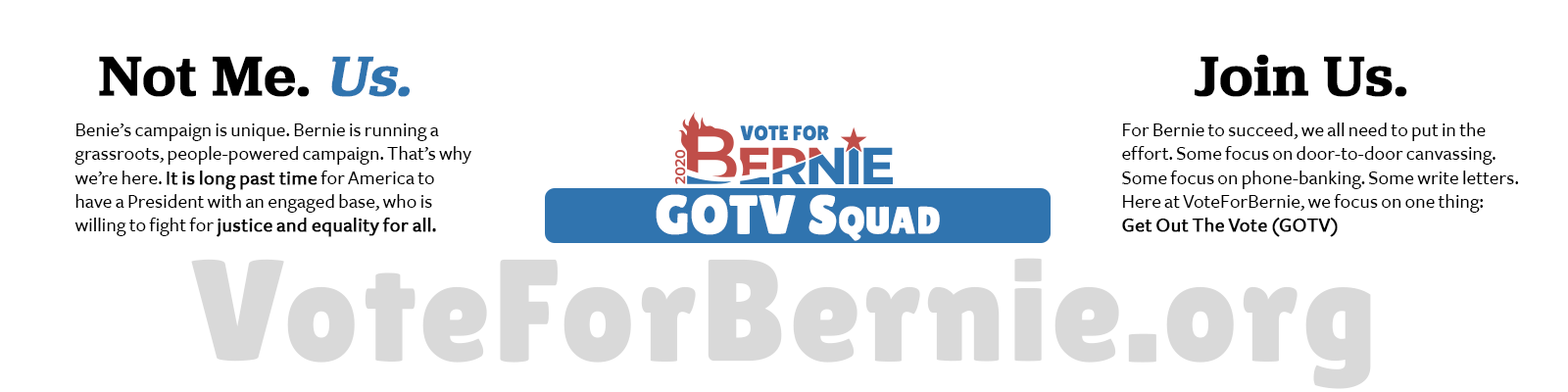
<style>
.page{position:relative;width:1568px;height:392px;background:#ffffff}
.page>*{position:absolute;margin:0}
.t1{font:58.1px "JubilatMedium-Roman";color:#000000;font-weight:bold}
.t2{font:58.1px "JubilatMedium-Roman";color:#3074af;font-weight:bold;font-style:italic}
.t3{font:19.9px "FreightSansMedium";color:#000000}
.t4{font:19.9px "FreightSansMedium";color:#000000;font-weight:bold}
.t5{font:54.3px "LilitaOne";color:#ffffff;font-variant:small-caps;font-weight:bold}
.t6{font:144.5px "LilitaOne";color:#d9d9d9;font-weight:bold}
</style>
<div class="page">
<p class="t1" style="left:1195px;top:54px;width:212px;height:43px">Join Us.</p>
<p class="t1" style="left:99px;top:56px;width:311px;height:41px">Not Me. <span class="t2">Us.</span></p>
<p class="t3" style="left:74px;top:123px;width:397px;height:114px">Benie’s campaign is unique. Bernie is running a grassroots, people-powered campaign. That’s why we’re here. <span class="t4">It is long past time</span> for America to have a President with an engaged base, who is willing to fight for <span class="t4">justice and equality for all.</span></p>
<p class="t3" style="left:1122px;top:122px;width:397px;height:115px">For Bernie to succeed, we all need to put in the effort. Some focus on door-to-door canvassing. Some focus on phone-banking. Some write letters.<br>Here at VoteForBernie, we focus on one thing:<br><span class="t4">Get Out The Vote (GOTV)</span></p>
<p class="t5" style="left:656px;top:194px;width:284px;height:47px">GOTV Squad</p>
<p class="t6" style="left:191px;top:258px;width:1180px;height:131px">VoteForBernie.org</p>
</div>
